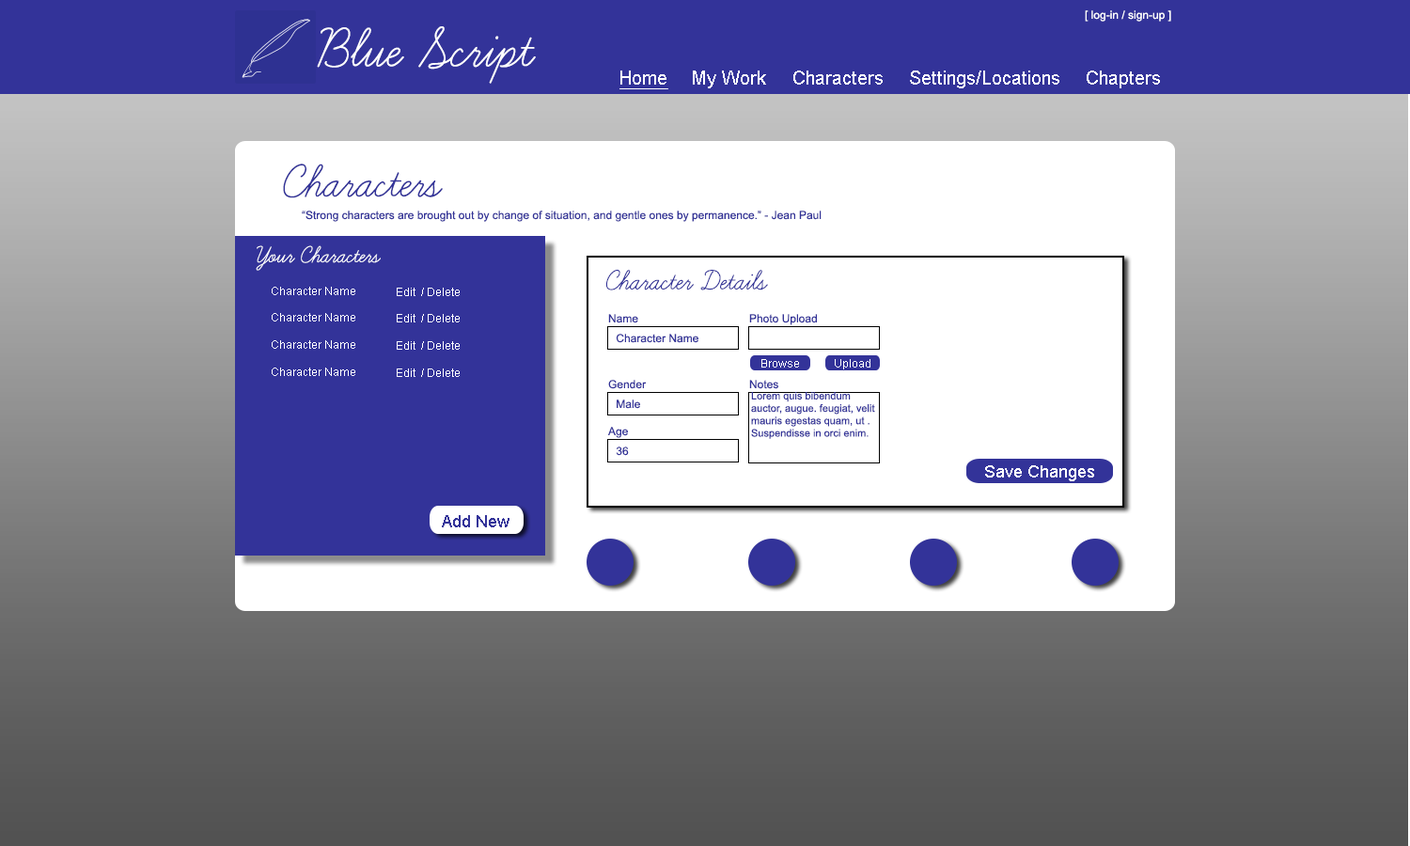
<style>
.page{position:relative;width:1410px;height:846px;background:#ffffff}
.page>*{position:absolute;margin:0}
.t1{font:11.3px "ArialMT";color:#ffffff}
.t2{font:67.7px "LearningCurve";color:#ffffff}
.t3{font:67.7px "LearningCurve";color:#ffffff;text-transform:uppercase}
.t4{font:18.8px "ArialMT";color:#ffffff;text-decoration:underline}
.t5{font:18.8px "ArialMT";color:#ffffff}
.t6{font:56.4px "LearningCurve";color:#333399}
.t7{font:11.3px "ArialMT";color:#333399}
.t8{font:28.2px "LearningCurve";color:#ffffff}
.t9{font:33.8px "LearningCurve";color:#333399}
.t10{font:10.3px "ArialMT";color:#333399}
.t11{font:16.9px "ArialMT";color:#ffffff}
.t12{font:16.9px "ArialMT";color:#333399}
</style>
<div class="page">
<p class="t1" style="left:1085px;top:10px;width:86px;height:12px">[ log-in / sign-up ]</p>
<p class="t2" style="left:317px;top:26px;width:219px;height:58px"><span class="t3">B</span>lue Script</p>
<p class="t4" style="left:619px;top:70px;width:49px;height:19px">Home</p>
<p class="t5" style="left:693px;top:70px;width:73px;height:18px">My Work</p>
<p class="t5" style="left:793px;top:70px;width:90px;height:15px">Characters</p>
<p class="t5" style="left:910px;top:70px;width:149px;height:18px">Settings/Locations</p>
<p class="t5" style="left:1086px;top:70px;width:74px;height:18px">Chapters</p>
<p class="t6" style="left:283px;top:164px;width:160px;height:34px">Characters</p>
<p class="t7" style="left:302px;top:211px;width:519px;height:11px">“Strong characters are brought out by change of situation, and gentle ones by permanence.” - Jean Paul</p>
<p class="t8" style="left:256px;top:245px;width:125px;height:26px">Your Characters</p>
<p class="t9" style="left:605px;top:270px;width:163px;height:20px">Character Details</p>
<p class="t1" style="left:272px;top:287px;width:83px;height:89px">Character Name<br><br>Character Name<br><br>Character Name<br><br>Character Name</p>
<p class="t1" style="left:397px;top:288px;width:63px;height:89px">Edit  / Delete<br><br>Edit  / Delete<br><br>Edit  / Delete<br><br>Edit  / Delete</p>
<p class="t7" style="left:608px;top:314px;width:30px;height:9px">Name</p>
<p class="t7" style="left:749px;top:314px;width:68px;height:11px">Photo Upload</p>
<p class="t7" style="left:616px;top:334px;width:82px;height:9px">Character Name</p>
<p class="t1" style="left:761px;top:359px;width:38px;height:8px">Browse</p>
<p class="t1" style="left:835px;top:359px;width:35px;height:10px">Upload</p>
<p class="t7" style="left:608px;top:380px;width:39px;height:9px">Gender</p>
<p class="t7" style="left:749px;top:380px;width:29px;height:9px">Notes</p>
<p class="t7" style="left:617px;top:399px;width:23px;height:10px">Male</p>
<p class="t10" style="left:751px;top:392px;width:124px;height:47px">Lorem quis bibendum auctor, augue. feugiat, velit mauris egestas quam, ut . Suspendisse in orci enim.</p>
<p class="t7" style="left:607px;top:427px;width:21px;height:11px">Age</p>
<p class="t7" style="left:616px;top:446px;width:13px;height:10px">36</p>
<p class="t11" style="left:985px;top:465px;width:109px;height:16px">Save Changes</p>
<p class="t12" style="left:442px;top:515px;width:67px;height:12px">Add New</p>
</div>
